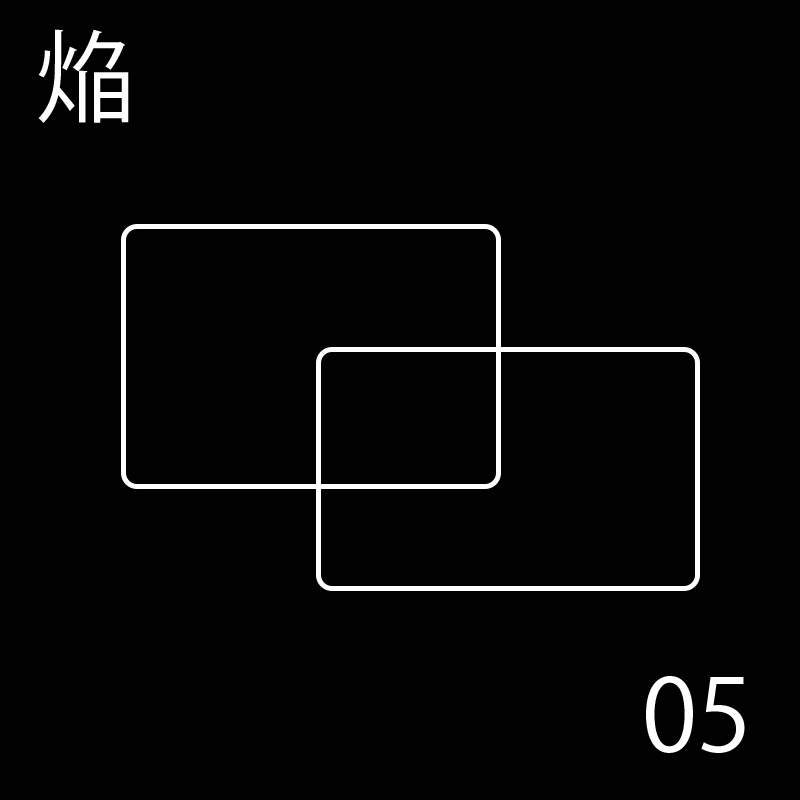
<style>
.page{position:relative;width:800px;height:800px;background:#010101}
.page>*{position:absolute;margin:0}
.t1{font:100px "KozGoPr6N-Regular";color:#ffffff}
</style>
<div class="page">
<p class="t1" style="left:38px;top:29px;width:91px;height:94px">焔</p>
<p class="t1" style="left:38px;top:29px;width:91px;height:94px">焔</p>
<p class="t1" style="left:38px;top:29px;width:91px;height:94px">焔</p>
<p class="t1" style="left:38px;top:29px;width:91px;height:94px">焔</p>
<p class="t1" style="left:38px;top:29px;width:91px;height:94px">焔</p>
<p class="t1" style="left:38px;top:29px;width:91px;height:94px">焔</p>
<p class="t1" style="left:646px;top:676px;width:102px;height:77px">00</p>
<p class="t1" style="left:646px;top:676px;width:85px;height:77px">01</p>
<p class="t1" style="left:646px;top:676px;width:101px;height:77px">02</p>
<p class="t1" style="left:646px;top:676px;width:99px;height:77px">03</p>
<p class="t1" style="left:646px;top:676px;width:105px;height:77px">04</p>
<p class="t1" style="left:646px;top:676px;width:99px;height:77px">05</p>
</div>
